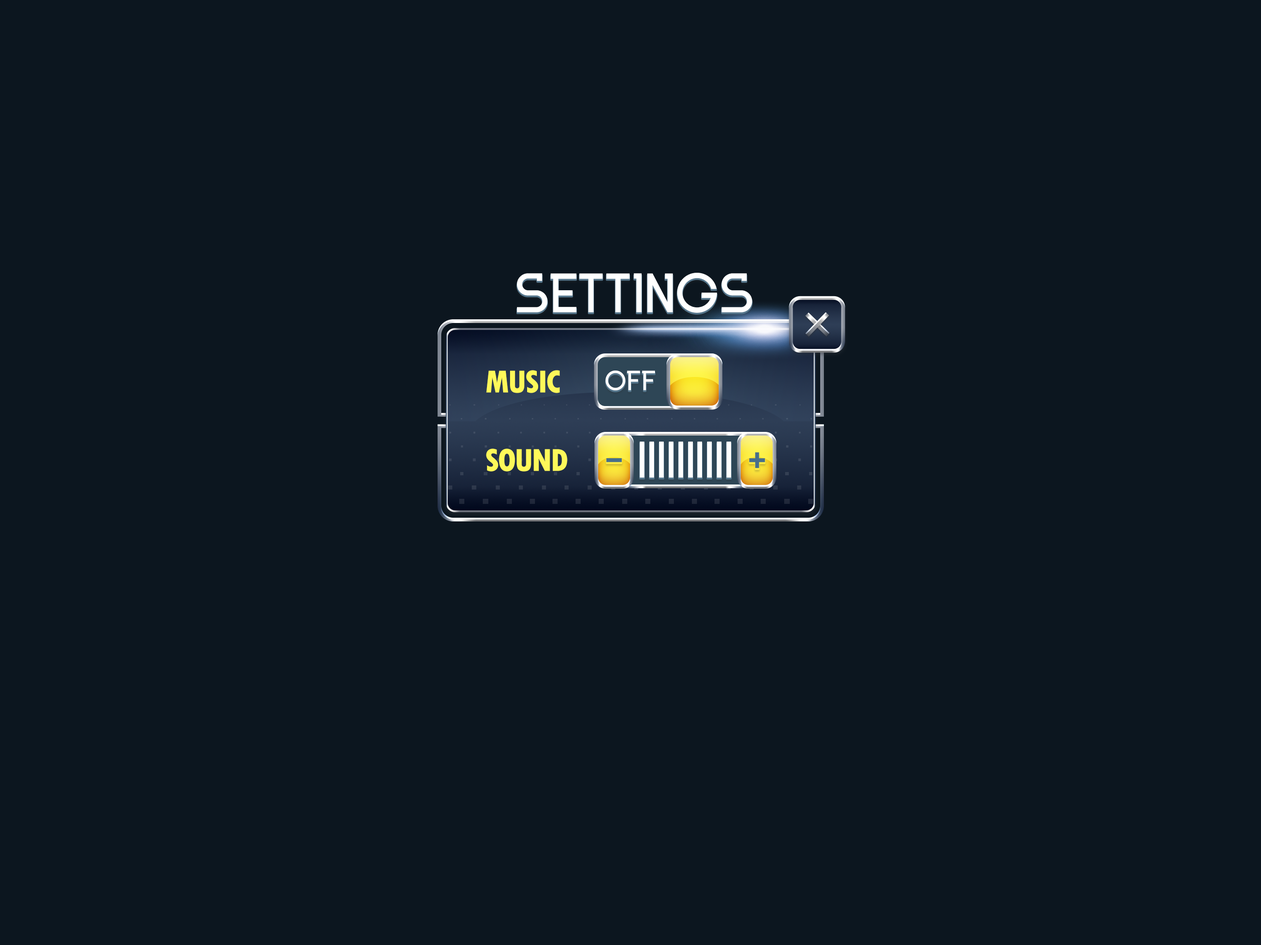
<style>
.page{position:relative;width:1261px;height:945px;background:#0c161f}
.page>*{position:absolute;margin:0}
.t1{font:55.4px "INKFERNO";color:#ffffff;text-transform:uppercase}
.t2{font:33.2px "TwCenMT-CondensedExtraBold";letter-spacing:-0.05em;color:#fef859;text-transform:uppercase}
.t3{font:27.7px "INKFERNO";color:#ffffff;text-transform:uppercase}
</style>
<div class="page">
<p class="t1" style="left:517px;top:273px;width:235px;height:40px">settings</p>
<p class="t2" style="left:486px;top:370px;width:74px;height:23px">music</p>
<p class="t3" style="left:606px;top:371px;width:49px;height:20px">off</p>
<p class="t2" style="left:486px;top:449px;width:81px;height:23px">sound</p>
</div>
